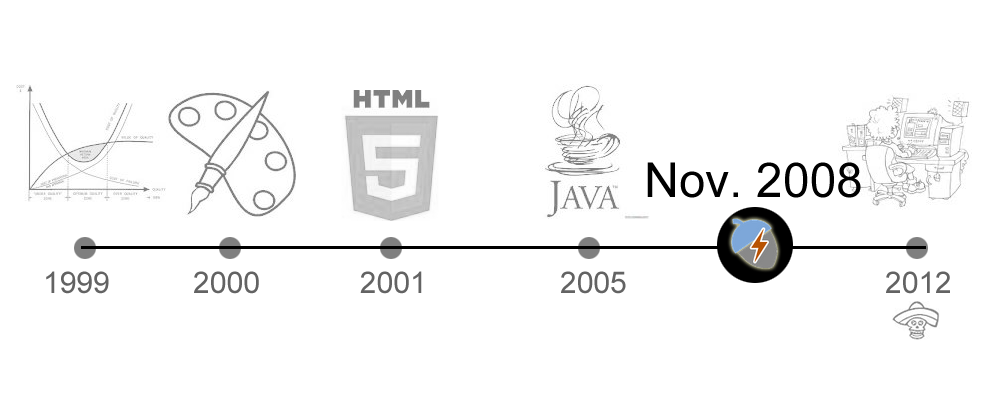
<style>
.page{position:relative;width:1000px;height:400px;background:#ffffff}
.page>*{position:absolute;margin:0}
.t1{font:48px "ArialMT";color:#000000}
.t2{font:30px "ArialMT";color:#636363}
</style>
<div class="page">
<p class="t1" style="left:647px;top:162px;width:214px;height:36px">Nov. 2008</p>
<p class="t2" style="left:46px;top:271px;width:904px;height:23px">1999          2000            2001                2005                               2012</p>
</div>
